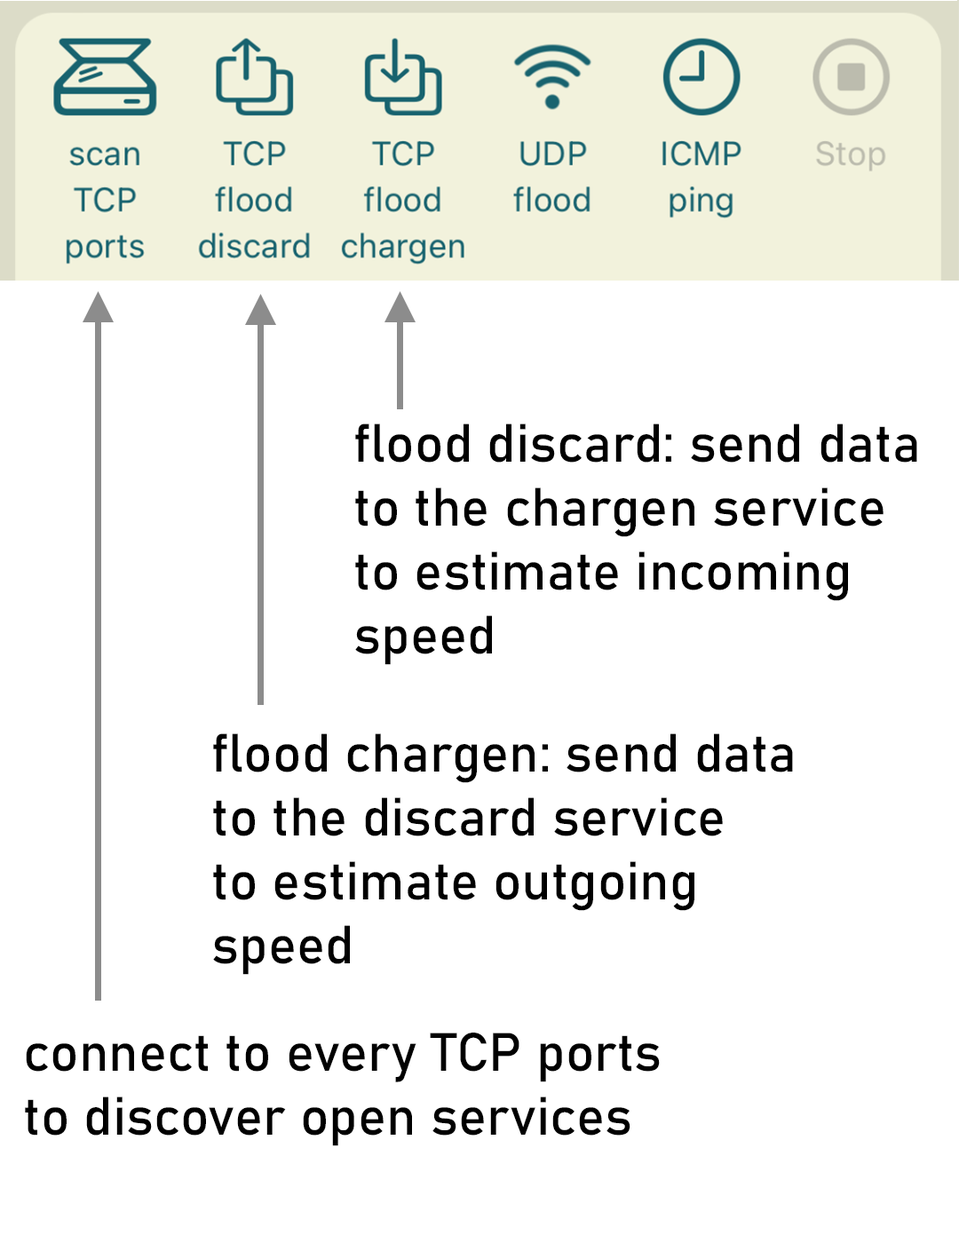
<style>
.page{position:relative;width:959px;height:1243px;background:#ffffff}
.page>*{position:absolute;margin:0}
.t1{font:53.3px "Bahnschrift";color:#000000}
</style>
<div class="page">
<p class="t1" style="left:355px;top:424px;width:562px;height:241px">flood discard: send data<br>to the chargen service<br>to estimate incoming<br>speed</p>
<p class="t1" style="left:213px;top:734px;width:580px;height:241px">flood chargen: send data<br>to the discard service<br>to estimate outgoing<br>speed</p>
<p class="t1" style="left:25px;top:1033px;width:635px;height:113px">connect to every TCP ports<br>to discover open services</p>
</div>
